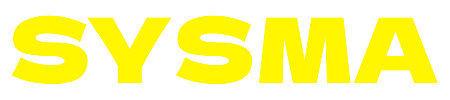
<style>
.page{position:relative;width:450px;height:100px;background:#ffffff}
.page>*{position:absolute;margin:0}
.t1{font:90px "DelaGothicOne-Regular";color:#fff600}
</style>
<div class="page">
<p class="t1" style="left:11px;top:15px;width:427px;height:69px">SYSMA</p>
</div>
